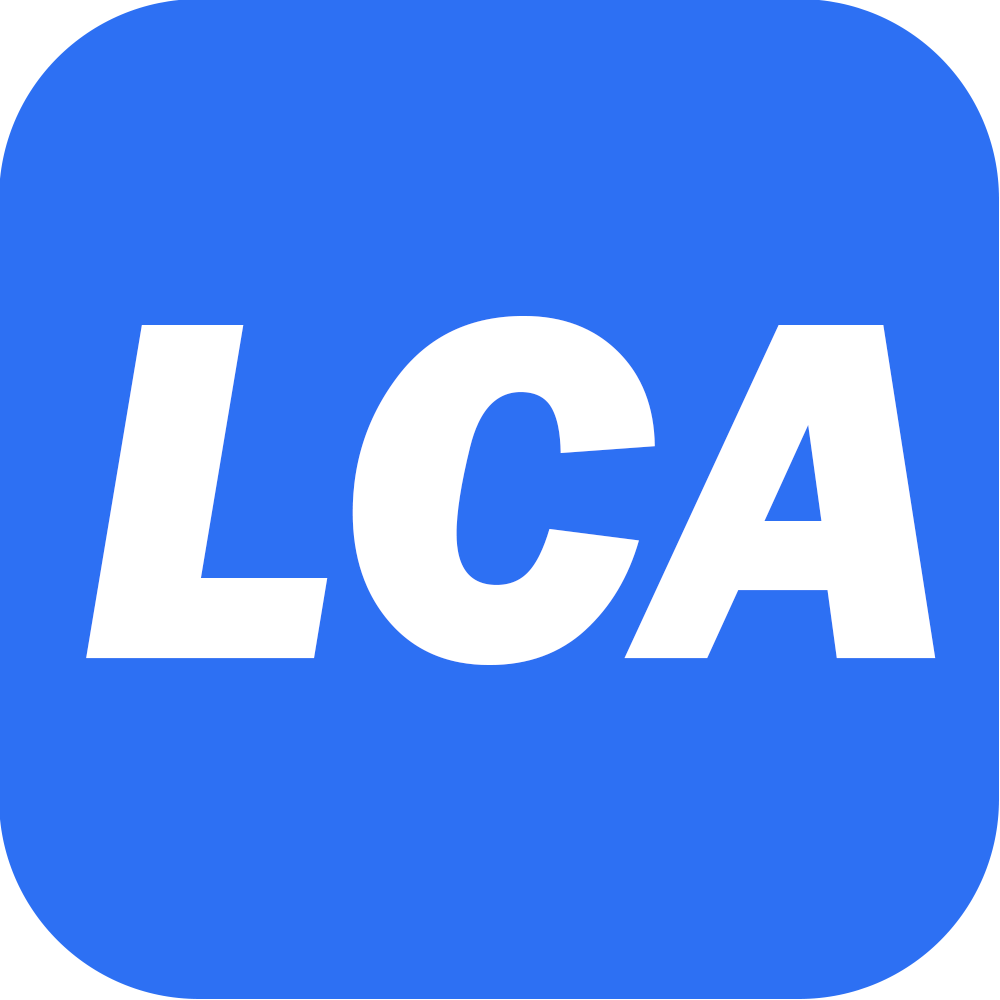
<style>
.page{position:relative;width:1000px;height:1000px;background:#2d70f3}
.page>*{position:absolute;margin:0}
.t1{font:500px "FranklinGothic-HeavyItalic";color:#ffffff}
</style>
<div class="page">
<p class="t1" style="left:86px;top:316px;width:850px;height:349px">LCA</p>
</div>
